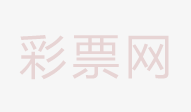
<style>
.page{position:relative;width:191px;height:112px;background:#f6f6f6}
.page>*{position:absolute;margin:0}
.t1{font:48px "MicrosoftYaHei";letter-spacing:0.1em;color:#e7d4d4}
</style>
<div class="page">
<p class="t1" style="left:19px;top:35px;width:150px;height:45px">彩票网</p>
</div>
